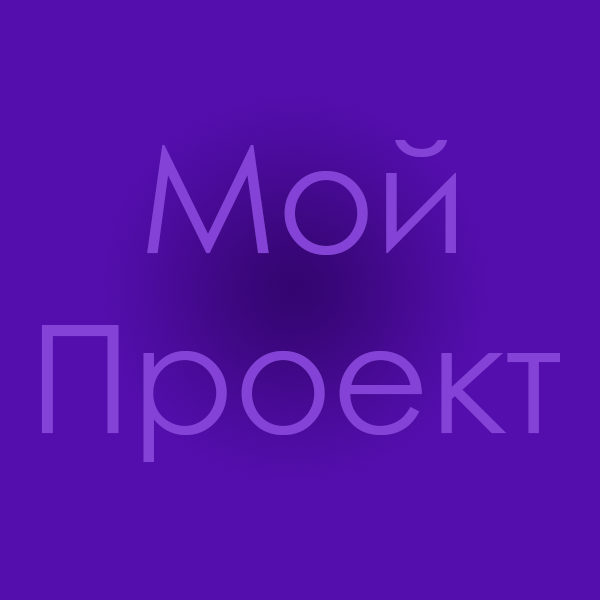
<style>
.page{position:relative;width:600px;height:600px;background:#540ead}
.page>*{position:absolute;margin:0}
.t1{font:150px "CenturyGothic";color:#8443d6}
.t2{font:100px "CenturyGothic";color:#8443d6}
</style>
<div class="page">
<p class="t1" style="left:41px;top:140px;width:519px;height:322px;text-align:center"><span class="t2">  </span>Мой <br>Проект</p>
</div>
